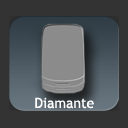
<style>
.page{position:relative;width:128px;height:128px;background:#333333}
.page>*{position:absolute;margin:0}
.t1{font:14px "TrebuchetMS";color:#ffffff}
</style>
<div class="page">
<p class="t1" style="left:35px;top:97px;width:59px;height:12px">Diamante</p>
</div>
